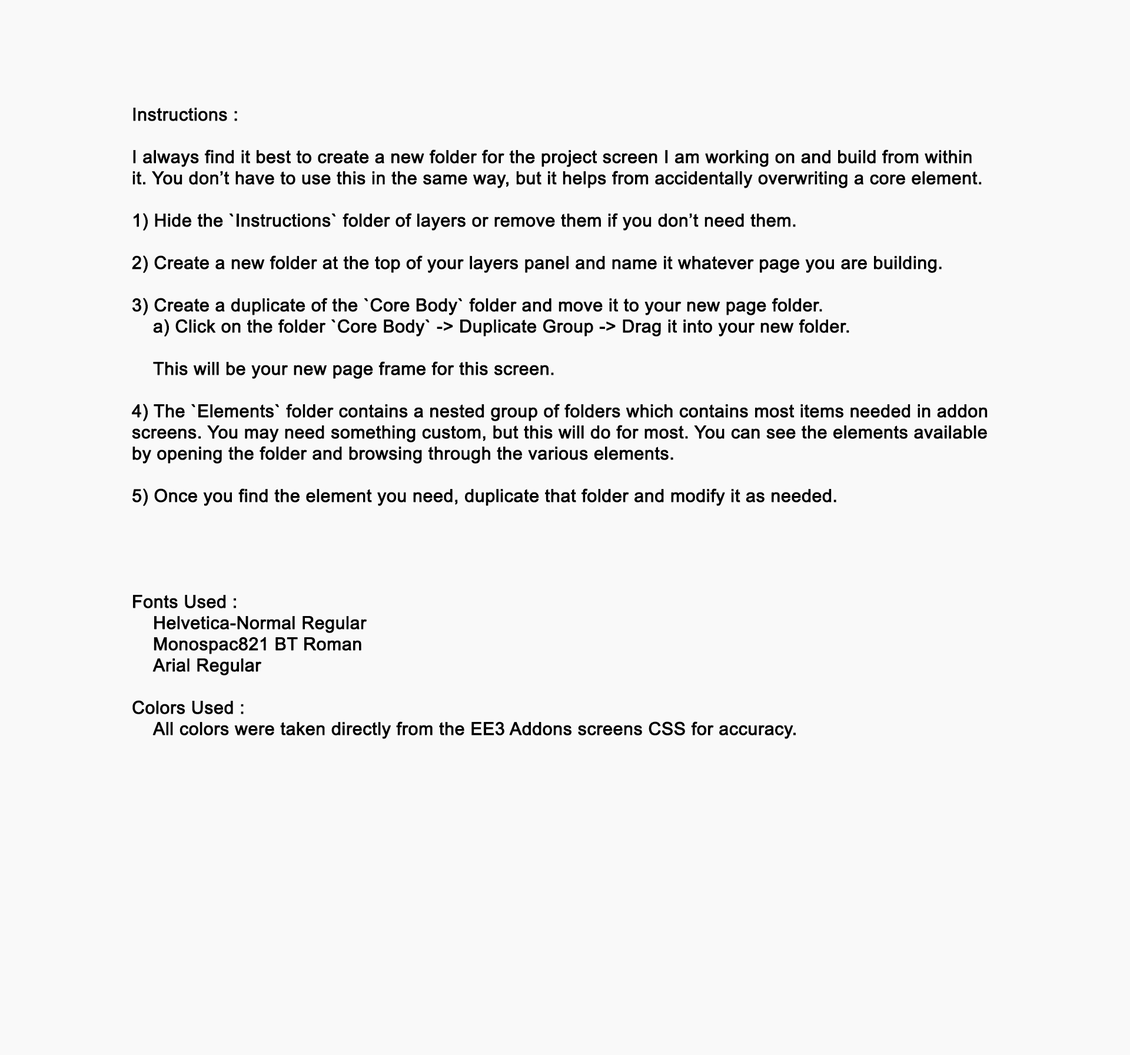
<style>
.page{position:relative;width:1130px;height:1055px;background:#f9f9f9}
.page>*{position:absolute;margin:0}
.t1{font:17.7px "ArialMT";color:#000000;font-weight:bold}
</style>
<div class="page">
<p class="t1" style="left:132px;top:108px;width:856px;height:631px">Instructions : <br><br>I always find it best to create a new folder for the project screen I am working on and build from within it. You don’t have to use this in the same way, but it helps from accidentally overwriting a core element.<br><br>1) Hide the `Instructions` folder of layers or remove them if you don’t need them.<br><br>2) Create a new folder at the top of your layers panel and name it whatever page you are building.<br><br>3) Create a duplicate of the `Core Body` folder and move it to your new page folder.<br> a) Click on the folder `Core Body` -&gt; Duplicate Group -&gt; Drag it into your new folder.<br> <br> This will be your new page frame for this screen.<br><br>4) The `Elements` folder contains a nested group of folders which contains most items needed in addon screens. You may need something custom, but this will do for most. You can see the elements available by opening the folder and browsing through the various elements.<br><br>5) Once you find the element you need, duplicate that folder and modify it as needed.<br><br><br><br><br>Fonts Used : <br> Helvetica-Normal Regular<br> Monospac821 BT Roman<br> Arial Regular<br><br>Colors Used : <br> All colors were taken directly from the EE3 Addons screens CSS for accuracy.</p>
</div>
